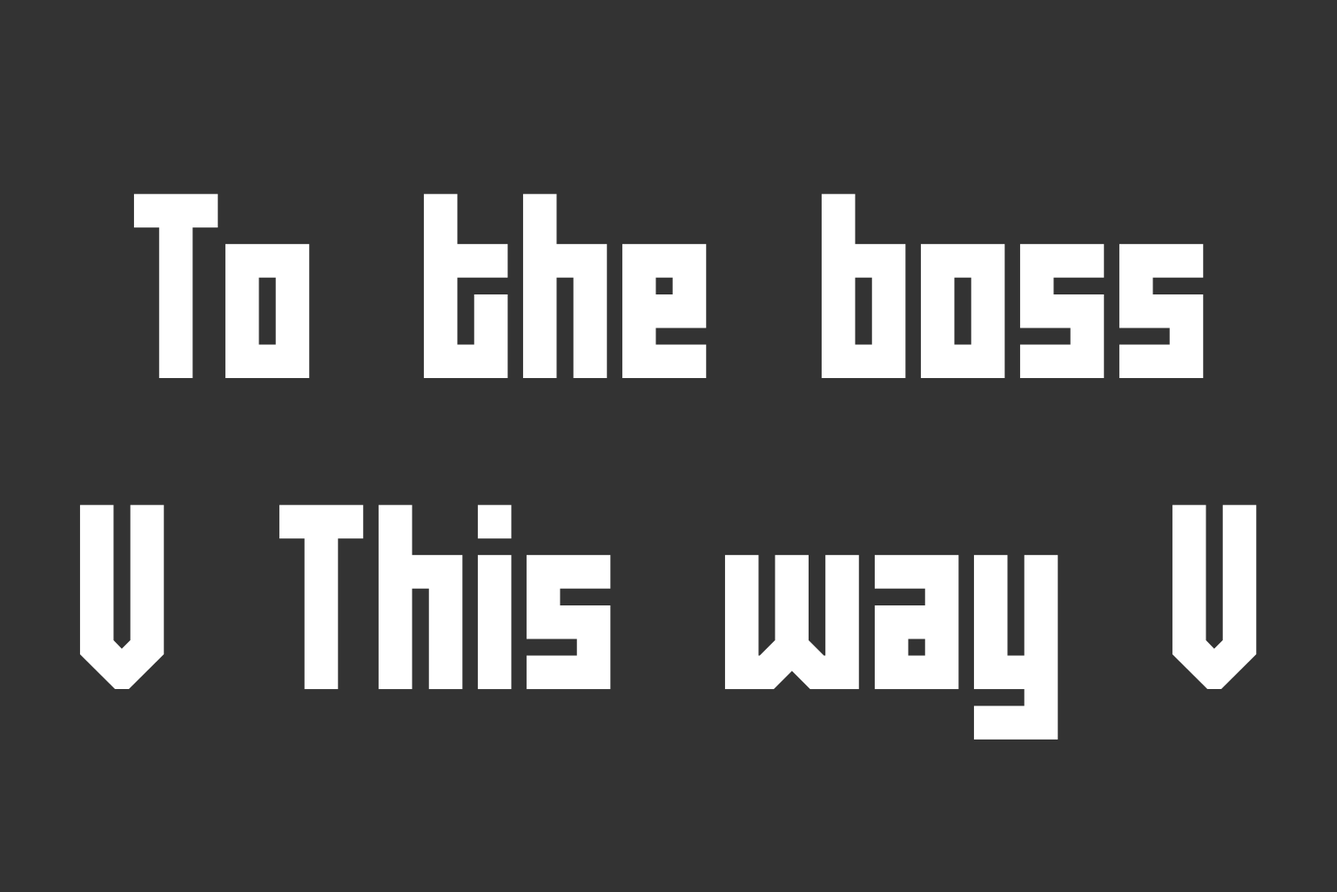
<style>
.page{position:relative;width:1337px;height:892px;background:#333333}
.page>*{position:absolute;margin:0}
.t1{font:259.4px "ZephyreanBRK";color:#ffffff}
.t2{font:259.4px "ZephyreanGustBRK";color:#ffffff}
</style>
<div class="page">
<p class="t1" style="left:79px;top:193px;width:1178px;height:546px;text-align:center">To the boss<br><span class="t2">V</span> This way <span class="t2">V</span></p>
</div>
